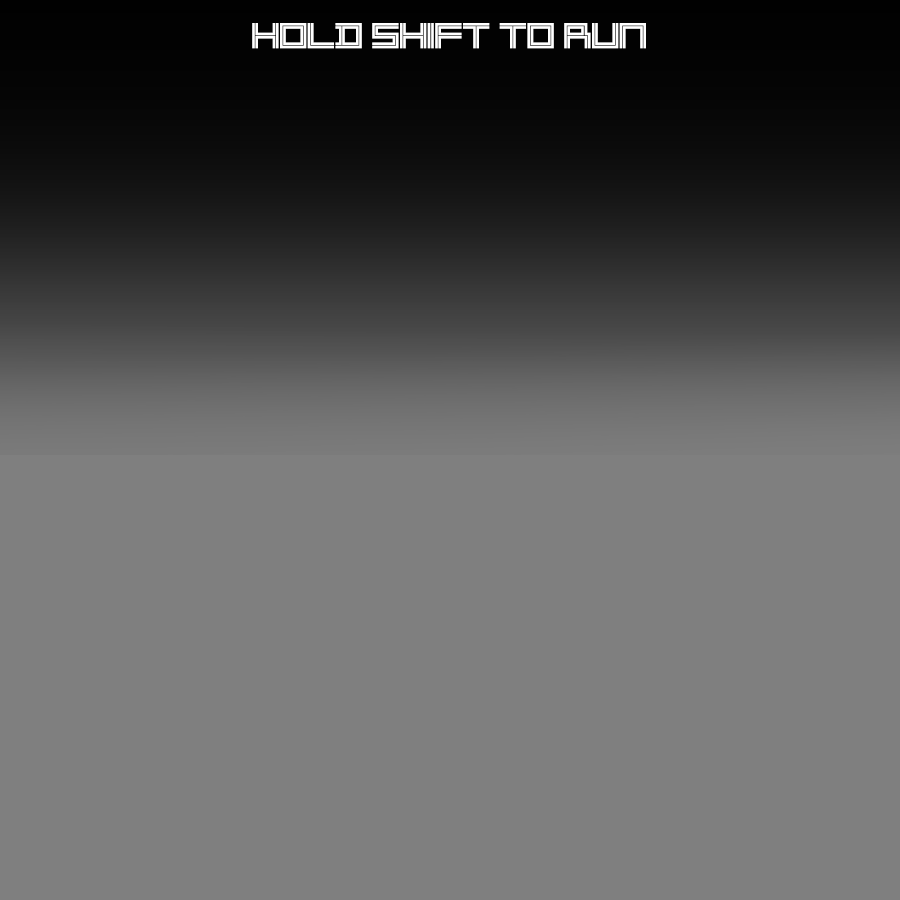
<style>
.page{position:relative;width:900px;height:900px;background:#7f7f7f}
.page>*{position:absolute;margin:0}
.t1{font:36px "2Lines";color:#ffffff}
</style>
<div class="page">
<p class="t1" style="left:252px;top:23px;width:394px;height:26px">Hold Shift To Run</p>
</div>
